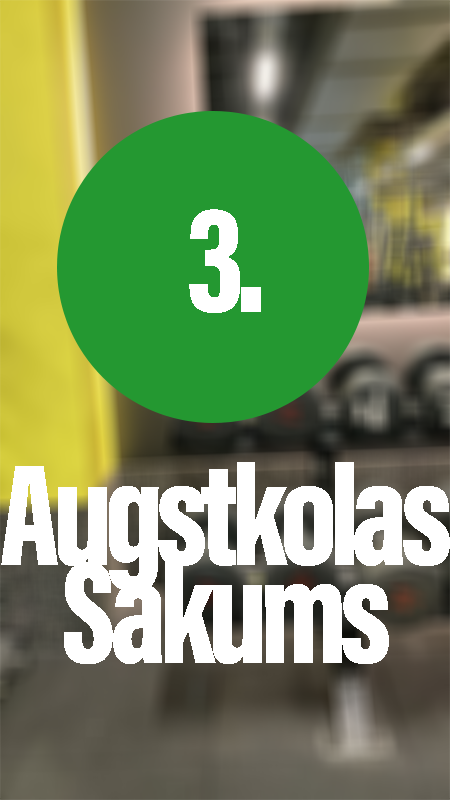
<style>
.page{position:relative;width:450px;height:800px;background:#249831}
.page>*{position:absolute;margin:0}
.t1{font:156.2px "AcuminConcept-ExtraCondensedBlack";letter-spacing:-0.05em;color:#ffffff}
.t2{font:148.4px/48.8px "AcuminConcept-ExtraCondensedBlack";letter-spacing:-0.05em;color:#ffffff}
</style>
<div class="page">
<p class="t1" style="left:189px;top:209px;width:72px;height:104px">3.</p>
<p class="t2" style="left:1px;top:462px;width:449px;height:202px;text-align:center">Augstkolas<br><br>Sakums</p>
</div>
